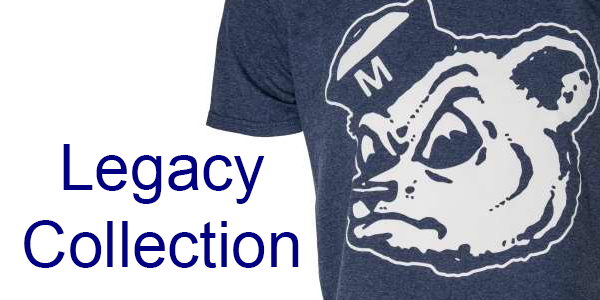
<style>
.page{position:relative;width:600px;height:300px;background:#ffffff}
.page>*{position:absolute;margin:0}
.t1{font:64px "ArialMT";color:#000080}
</style>
<div class="page">
<p class="t1" style="left:24px;top:144px;width:275px;height:124px;text-align:center">Legacy<br>Collection</p>
</div>
